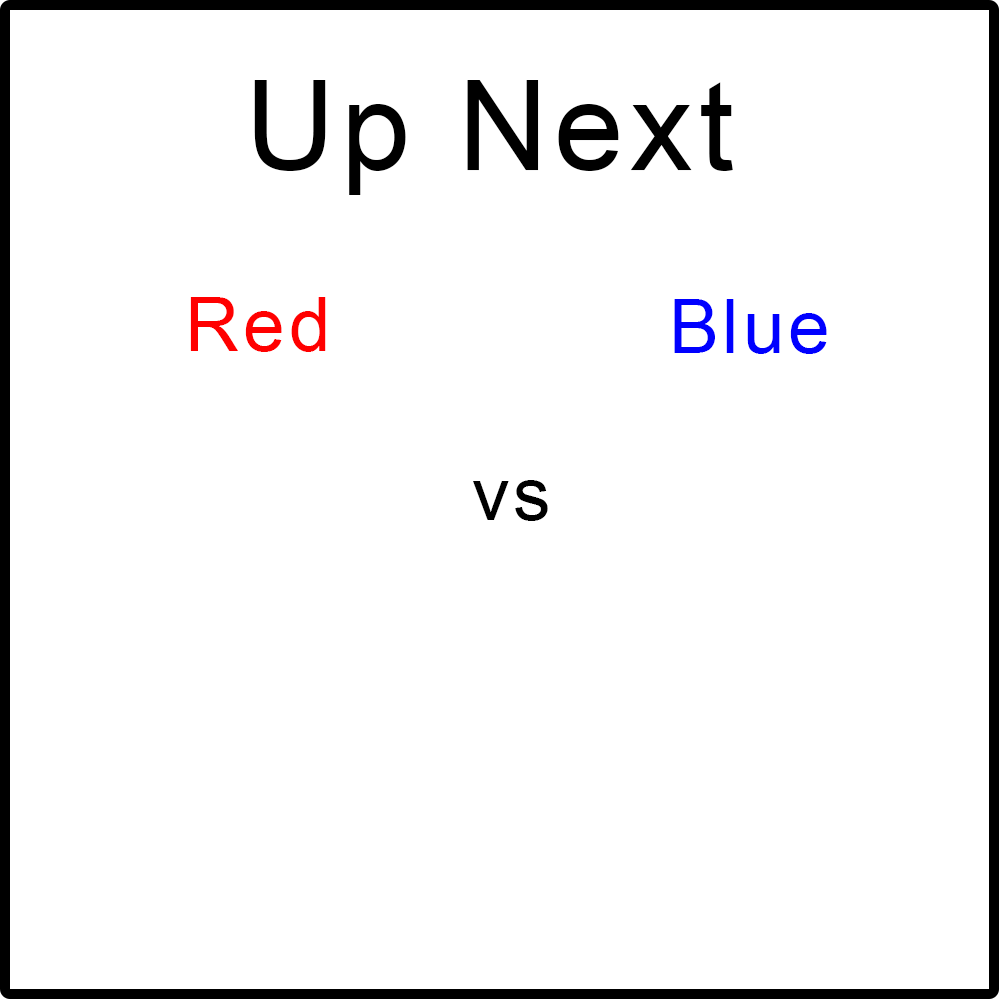
<style>
.page{position:relative;width:1000px;height:1000px;background:#ffffff}
.page>*{position:absolute;margin:0}
.t1{font:125px "ArialMT";letter-spacing:0.05em;color:#000000}
.t2{font:75px "ArialMT";letter-spacing:0.05em;color:#ff0000}
.t3{font:75px "ArialMT";letter-spacing:0.05em;color:#0000ff}
.t4{font:75px "ArialMT";letter-spacing:0.05em;color:#000000}
</style>
<div class="page">
<p class="t1" style="left:254px;top:80px;width:479px;height:115px">Up Next</p>
<p class="t2" style="left:190px;top:297px;width:136px;height:55px">Red</p>
<p class="t3" style="left:674px;top:299px;width:153px;height:55px">Blue</p>
<p class="t4" style="left:473px;top:480px;width:75px;height:41px">vs</p>
</div>
